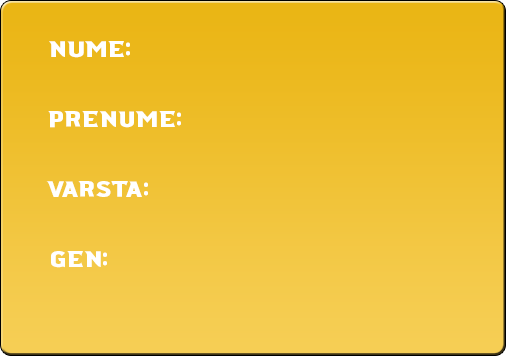
<style>
.page{position:relative;width:506px;height:356px}
.page>*{position:absolute;margin:0}
.t1{font:22.5px "Ridgeline201-Regular";color:#ffffff}
</style>
<div class="page">
<p class="t1" style="left:49px;top:41px;width:81px;height:17px">:nume</p>
<p class="t1" style="left:48px;top:111px;width:133px;height:17px">:prenume</p>
<p class="t1" style="left:46px;top:181px;width:102px;height:16px">:varsta</p>
<p class="t1" style="left:51px;top:251px;width:56px;height:17px">:gen</p>
</div>
